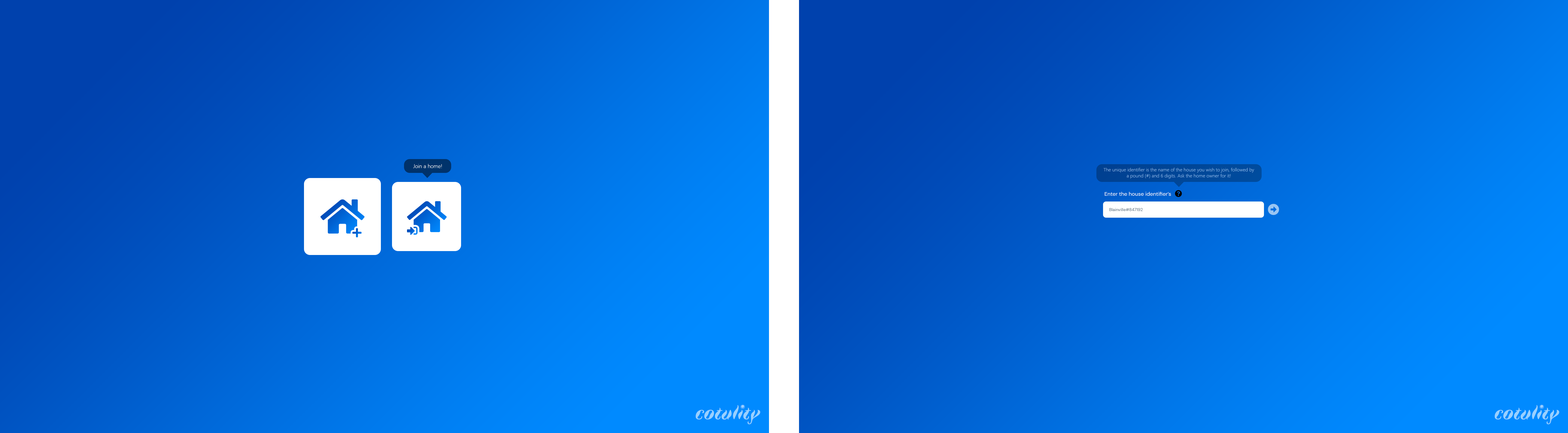
<style>
.page{position:relative;width:1568px;height:433px}
.page>*{position:absolute;margin:0}
.t1{font:5.4px "SegoeUI-Light";color:#ffffff}
.t2{font:4.8px "SegoeUI-Light";color:#8cb7ea}
.t3{font:5.4px "DMSans-Regular";color:#ffffff}
.t4{font:4.2px "DMSans-Regular";color:#657786}
.t5{font:19.5px "Faune-DisplayBoldItalic";color:#99d0ff}
.t6{font:8.7px "Faune-DisplayBlack"}
</style>
<div class="page">
<p class="t1" style="left:413px;top:164px;width:29px;height:4px">Join a home!</p>
<p class="t2" style="left:1103px;top:168px;width:151px;height:10px;text-align:center">The unique identifier is the name of the house you wish to join, followed by a pound (#) and 6 digits. Ask the home owner for it!</p>
<p class="t3" style="left:1105px;top:192px;width:66px;height:4px;opacity:0.9">Enter the house identifier’s</p>
<p class="t4" style="left:1109px;top:208px;width:34px;height:3px">Blainville#847192</p>
<p class="t5" style="left:696px;top:405px;width:64px;height:19px">cotulity</p>
<p class="t5" style="left:704px;top:409px;width:10px;height:10px">o</p>
<p class="t5" style="left:722px;top:410px;width:10px;height:9px">u</p>
<p class="t6" style="left:740px;top:404px;width:5px;height:5px;rotate:90deg">o</p>
<p class="t5" style="left:743px;top:407px;width:8px;height:12px">t</p>
<p class="t5" style="left:1495px;top:405px;width:64px;height:19px">cotulity</p>
<p class="t5" style="left:1503px;top:409px;width:10px;height:10px">o</p>
<p class="t5" style="left:1521px;top:410px;width:10px;height:9px">u</p>
<p class="t6" style="left:1539px;top:404px;width:5px;height:5px;rotate:90deg">o</p>
<p class="t5" style="left:1542px;top:407px;width:8px;height:12px">t</p>
</div>
